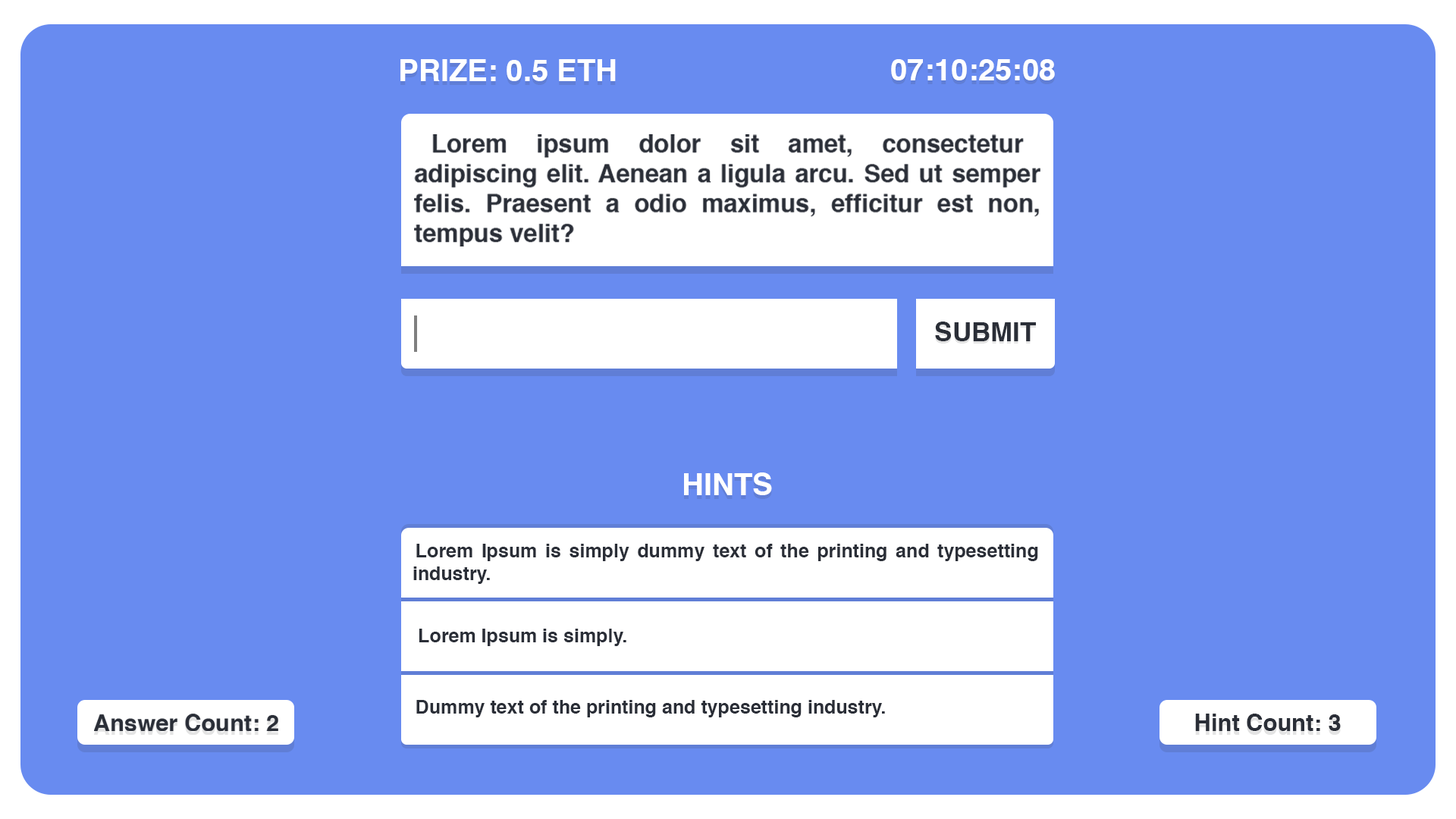
<style>
.page{position:relative;width:1456px;height:819px;background:#688bf0}
.page>*{position:absolute;margin:0}
.t1{font:30.3px "Helvetica-Bold";color:#ffffff}
.t2{font:26.5px "Helvetica-Bold";color:#2a2e37}
.t3{font:19px "Helvetica-Bold";color:#2a2e37}
.t4{font:23.2px "Helvetica-Bold";color:#2a2e37}
</style>
<div class="page">
<p class="t1" style="left:400px;top:59px;width:216px;height:22px">PRIZE: 0.5 ETH</p>
<p class="t1" style="left:891px;top:59px;width:164px;height:21px">07:10:25:08</p>
<p class="t2" style="left:935px;top:322px;width:101px;height:19px">SUBMIT</p>
<p class="t1" style="left:684px;top:472px;width:88px;height:23px">HINTS</p>
<p class="t3" style="left:413px;top:544px;width:625px;height:40px;text-align:justify">Lorem Ipsum is simply dummy text of the printing and typesetting industry.</p>
<p class="t3" style="left:419px;top:629px;width:207px;height:17px">Lorem Ipsum is simply.</p>
<p class="t3" style="left:416px;top:700px;width:469px;height:17px">Dummy text of the printing and typesetting industry.</p>
<p class="t4" style="left:1195px;top:714px;width:146px;height:17px">Hint Count: 3</p>
</div>
